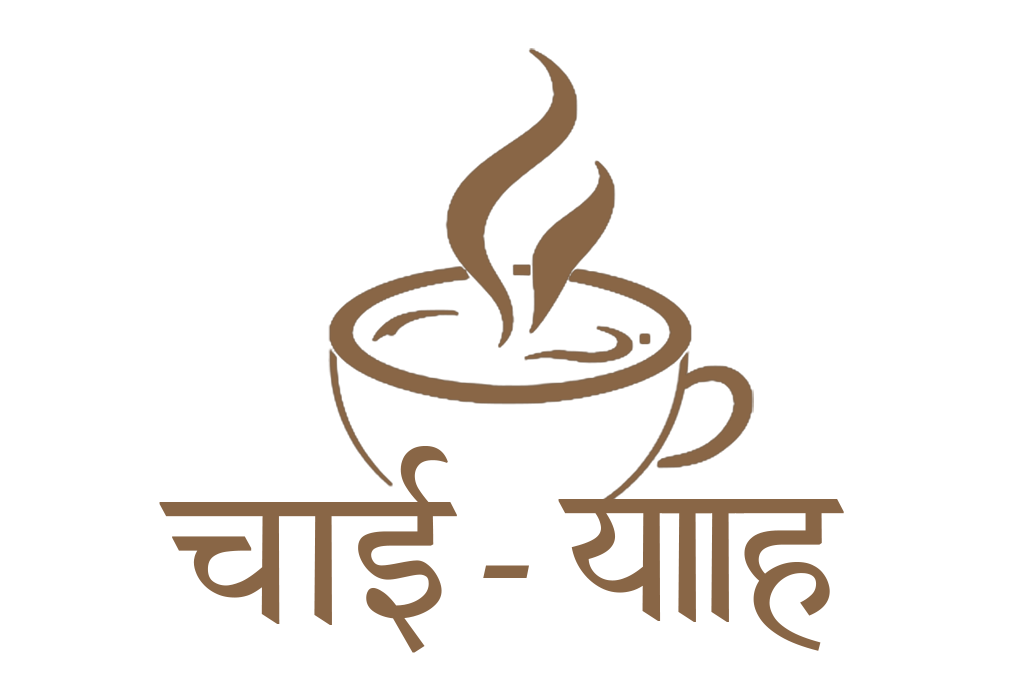
<style>
.page{position:relative;width:1024px;height:700px;background:#ffffff}
.page>*{position:absolute;margin:0}
.t1{font:194.4px "TiroDevaHindi-Regular";color:#896646}
.t2{font:194.4px "AdobeDevanagari-Bold";color:#896646}
</style>
<div class="page">
<p class="t1" style="left:159px;top:446px;width:298px;height:207px">चाई</p>
<p class="t1" style="left:729px;top:499px;width:115px;height:152px">ह</p>
<p class="t2" style="left:483px;top:565px;width:46px;height:13px">-</p>
</div>
